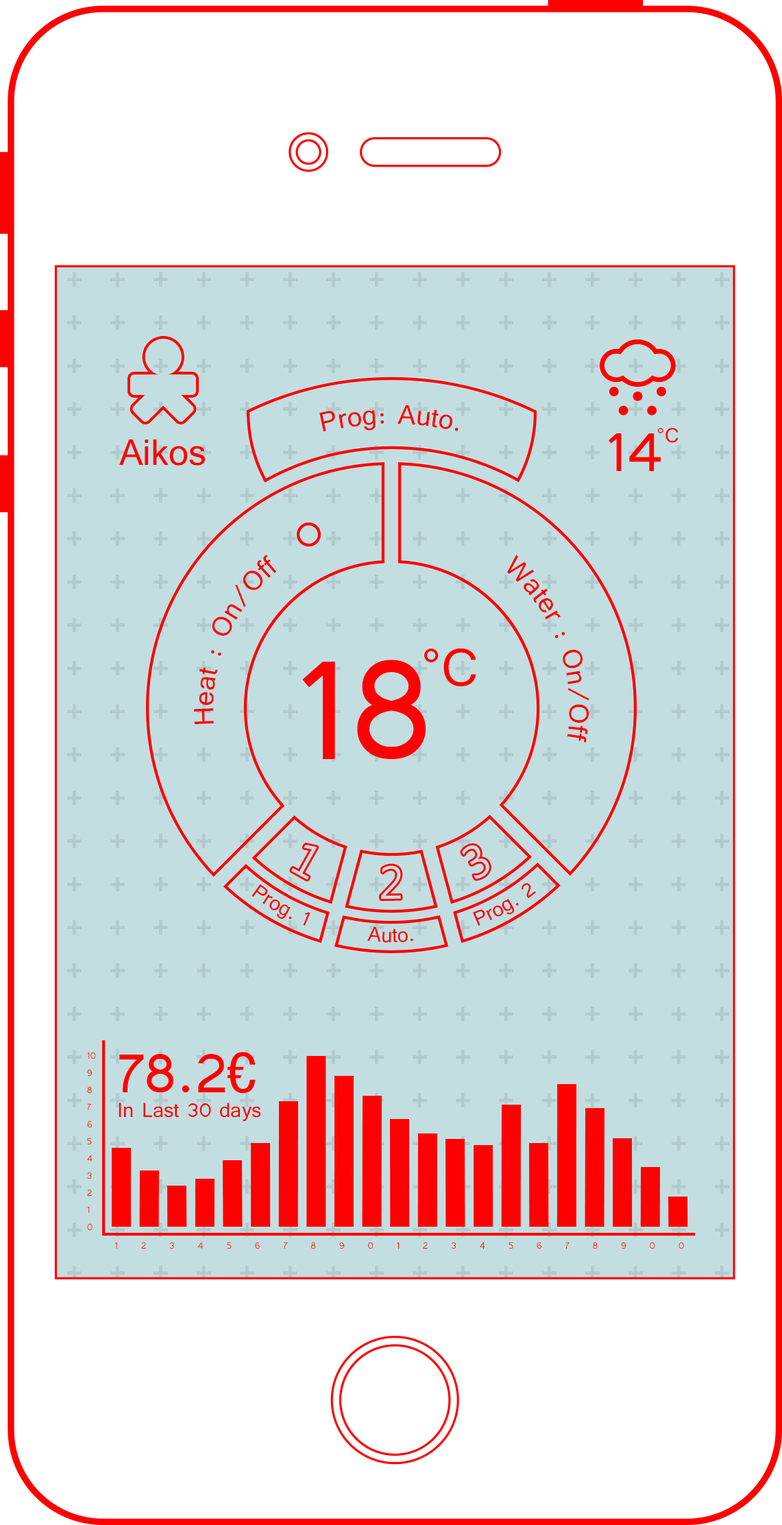
<style>
.page{position:relative;width:782px;height:1525px;background:#c2dee1}
.page>*{position:absolute;margin:0}
.t1{font:34.3px "Tunga";color:#ff0000}
.t2{font:70.8px "Tunga";color:#ff0000}
.t3{font:25.4px "Tunga";color:#ff0000}
.t4{font:45.7px "Tunga";color:#ff0000}
.t5{font:65.6px "Tunga";color:#ff0000}
.t6{font:183.1px "Tunga";color:#ff0000}
.t7{font:25.7px "Tunga";color:#ff0000}
.t8{font:11.4px/17.1px "Tunga";color:#ff0000}
.t9{font:11.4px "Tunga";letter-spacing:2.02em;color:#ff0000}
</style>
<div class="page">
<p class="t1" style="left:319px;top:404px;width:140px;height:28px">Prog: Auto.</p>
<p class="t2" style="left:609px;top:433px;width:52px;height:38px">14</p>
<p class="t3" style="left:658px;top:428px;width:21px;height:15px">°C</p>
<p class="t4" style="left:119px;top:439px;width:86px;height:26px">Aikos</p>
<p class="t1" style="left:194px;top:555px;width:82px;height:169px;text-align:center">Heat : On/Off</p>
<p class="t1" style="left:507px;top:555px;width:83px;height:187px;text-align:center">Water : On/Off</p>
<p class="t5" style="left:424px;top:648px;width:52px;height:38px">°C</p>
<p class="t6" style="left:302px;top:659px;width:124px;height:100px">18</p>
<p class="t7" style="left:252px;top:884px;width:59px;height:41px">Prog. 1</p>
<p class="t7" style="left:473px;top:883px;width:63px;height:42px">Prog. 2</p>
<p class="t7" style="left:367px;top:926px;width:46px;height:17px">Auto.</p>
<p class="t8" style="left:87px;top:1052px;width:9px;height:178px">10<br>9<br>8<br>7<br>6<br>5<br>4<br>3<br>2<br>1<br>0</p>
<p class="t2" style="left:119px;top:1052px;width:137px;height:41px">78.2€</p>
<p class="t3" style="left:119px;top:1102px;width:142px;height:19px">In Last 30 days</p>
<p class="t9" style="left:115px;top:1241px;width:569px;height:8px">123456789012345678900</p>
</div>
